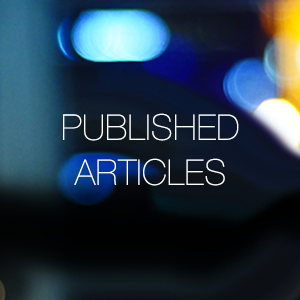
<style>
.page{position:relative;width:300px;height:300px}
.page>*{position:absolute;margin:0}
.t1{font:35px/45px "HelveticaNeue-UltraLight";color:#ffffff;font-weight:bold}
</style>
<div class="page">
<p class="t1" style="left:63px;top:113px;width:176px;height:73px;text-align:center">PUBLISHED<br>ARTICLES</p>
</div>
